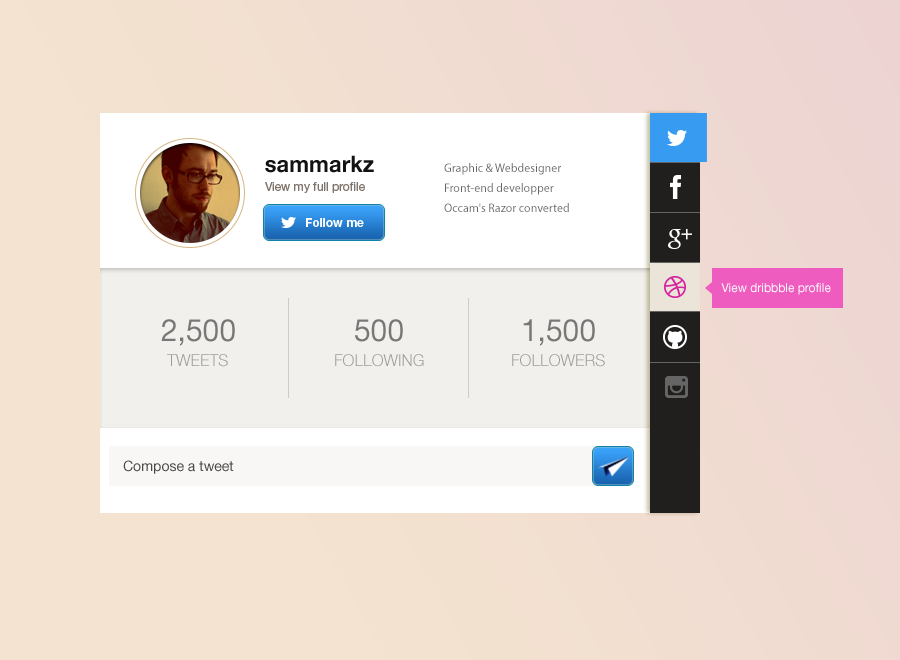
<style>
.page{position:relative;width:900px;height:660px}
.page>*{position:absolute;margin:0}
.t1{font:22.7px "HelveticaNeue-Bold";color:#131212}
.t2{font:12.4px/20px "MyriadPro-Regular";color:#656565}
.t3{font:12.4px "HelveticaNeue-Roman";color:#7f746b}
.t4{font:12.4px "HelveticaNeue-Bold";color:#ffffff}
.t5{font:12.4px "HelveticaNeue-Roman";color:#ffffff}
.t6{font:30.9px "HelveticaNeue-Roman";color:#777777}
.t7{font:16.5px "HelveticaNeue-Light";color:#9b9b9b}
.t8{font:14.4px "HelveticaNeue-Roman";color:#484848}
</style>
<div class="page">
<p class="t1" style="left:265px;top:155px;width:109px;height:18px">sammarkz</p>
<p class="t2" style="left:444px;top:163px;width:125px;height:49px">Graphic &amp; Webdesigner<br>Front-end developper<br>Occam's Razor converted</p>
<p class="t3" style="left:265px;top:182px;width:100px;height:11px">View my full profile</p>
<p class="t4" style="left:306px;top:218px;width:58px;height:9px">Follow me</p>
<p class="t5" style="left:721px;top:283px;width:110px;height:12px">View dribbble profile</p>
<p class="t6" style="left:161px;top:319px;width:74px;height:27px">2,500</p>
<p class="t6" style="left:355px;top:319px;width:48px;height:23px">500</p>
<p class="t6" style="left:523px;top:319px;width:72px;height:27px">1,500</p>
<p class="t7" style="left:167px;top:354px;width:61px;height:13px">TWEETS</p>
<p class="t7" style="left:335px;top:354px;width:89px;height:13px">FOLLOWING</p>
<p class="t7" style="left:512px;top:354px;width:93px;height:13px">FOLLOWERS</p>
<p class="t8" style="left:123px;top:460px;width:111px;height:14px">Compose a tweet</p>
</div>
